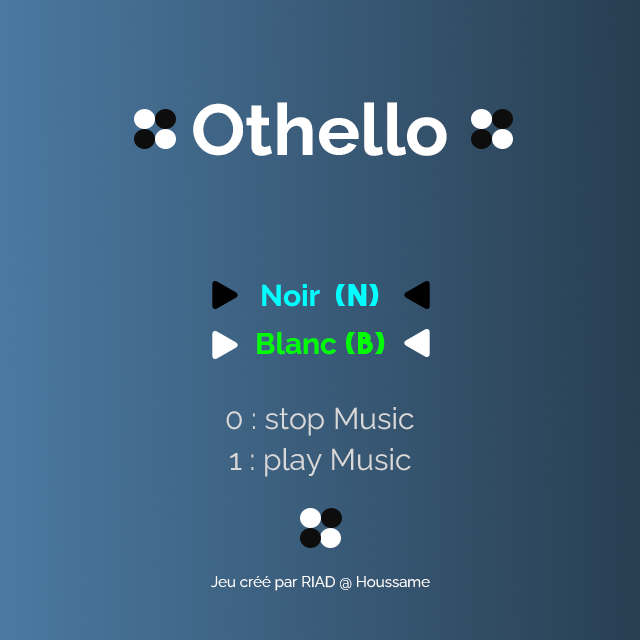
<style>
.page{position:relative;width:640px;height:640px}
.page>*{position:absolute;margin:0}
.t1{font:72px "Raleway-Bold";color:#ffffff}
.t2{font:30px "Raleway-Bold";color:#00ffff}
.t3{font:30px "TheBoldFont";color:#00ffff}
.t4{font:30px "Raleway-Bold";color:#00ff00}
.t5{font:30px "TheBoldFont";color:#00ff00}
.t6{font:30px "Raleway-Regular";color:#d9d9d9}
.t7{font:15px "Raleway-Regular";color:#ffffff}
</style>
<div class="page">
<p class="t1" style="left:193px;top:102px;width:254px;height:54px">Othello</p>
<p class="t2" style="left:262px;top:284px;width:117px;height:23px">Noir  <span class="t3">(N)</span></p>
<p class="t4" style="left:257px;top:332px;width:128px;height:23px">Blanc <span class="t5">(B)</span></p>
<p class="t6" style="left:226px;top:407px;width:188px;height:29px">0 : stop Music</p>
<p class="t6" style="left:230px;top:448px;width:181px;height:29px">1 : play Music</p>
<p class="t7" style="left:211px;top:576px;width:219px;height:15px">Jeu créé par RIAD @ Houssame</p>
</div>
